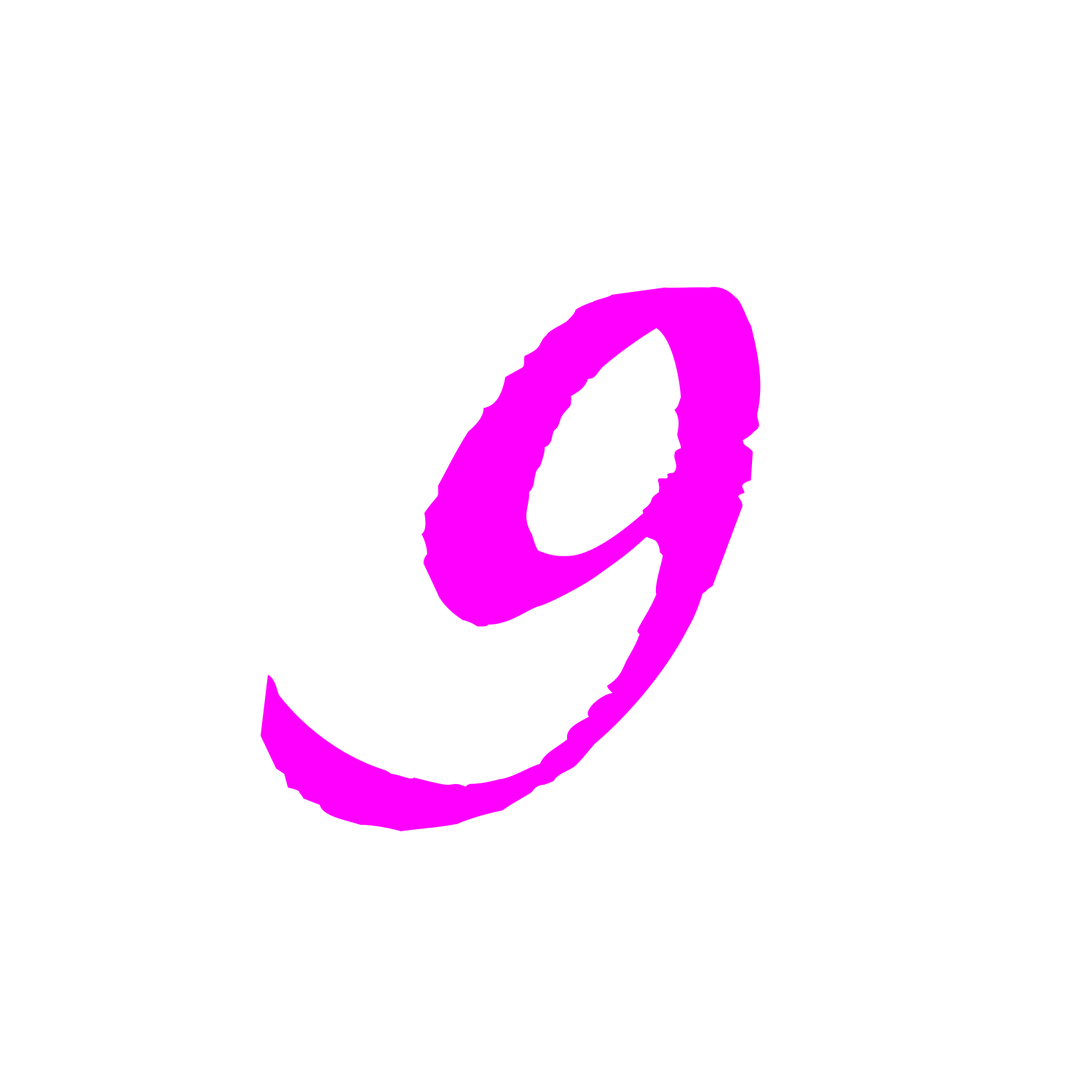
<style>
.page{position:relative;width:1092px;height:1092px;background:#ffffff}
.page>*{position:absolute;margin:0}
.t1{font:910px "BansheeStd";color:#ff00ff}
</style>
<div class="page">
<p class="t1" style="left:261px;top:287px;width:500px;height:544px">9</p>
</div>
